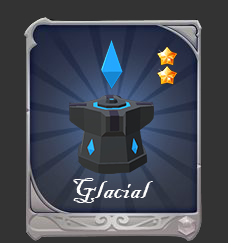
<style>
.page{position:relative;width:228px;height:243px;background:#333333}
.page>*{position:absolute;margin:0}
.t1{font:30px "BlackadderITC-Regular";color:#ffffff}
</style>
<div class="page">
<p class="t1" style="left:73px;top:178px;width:80px;height:25px">Glacial</p>
</div>
